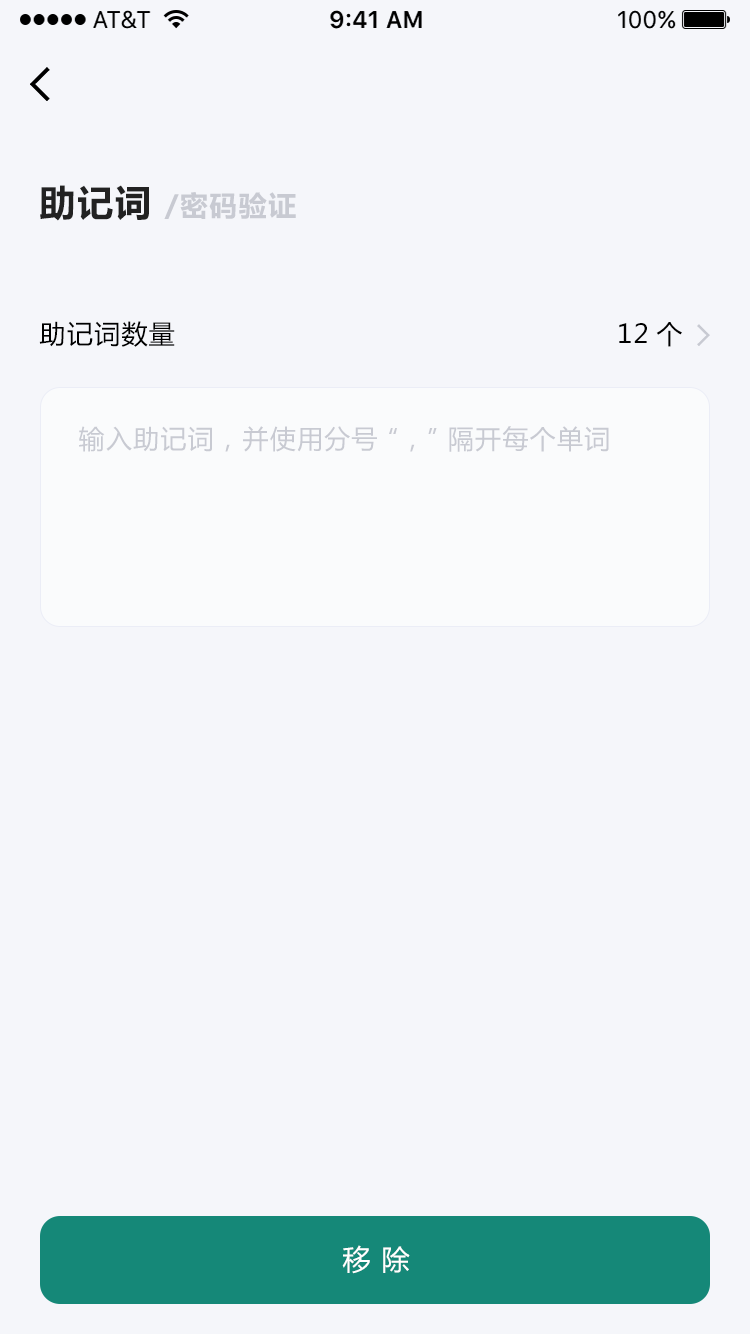
<style>
.page{position:relative;width:750px;height:1334px;background:#f5f6fa}
.page>*{position:absolute;margin:0}
.t1{font:28px "MicrosoftYaHei-Bold";letter-spacing:0.05em;color:#c8cad2}
.t2{font:36px "MicrosoftYaHei-Bold";letter-spacing:0.05em;color:#222222}
.t3{font:26px "MicrosoftYaHei";letter-spacing:0.05em;color:#000000}
.t4{font:26px "MicrosoftYaHei";letter-spacing:0.05em;color:#c8cad2}
.t5{font:28px "MicrosoftYaHei";letter-spacing:0.05em;color:#ffffff}
</style>
<div class="page">
<p class="t1" style="left:40px;top:185px;width:256px;height:36px"><span class="t2">助记词 </span>/密码验证</p>
<p class="t3" style="left:39px;top:321px;width:136px;height:26px">助记词数量</p>
<p class="t3" style="left:619px;top:322px;width:63px;height:25px">12个</p>
<p class="t4" style="left:79px;top:426px;width:530px;height:26px">输入助记词，并使用分号“，”隔开每个单词</p>
<p class="t5" style="left:342px;top:1245px;width:68px;height:29px">移 除</p>
</div>
